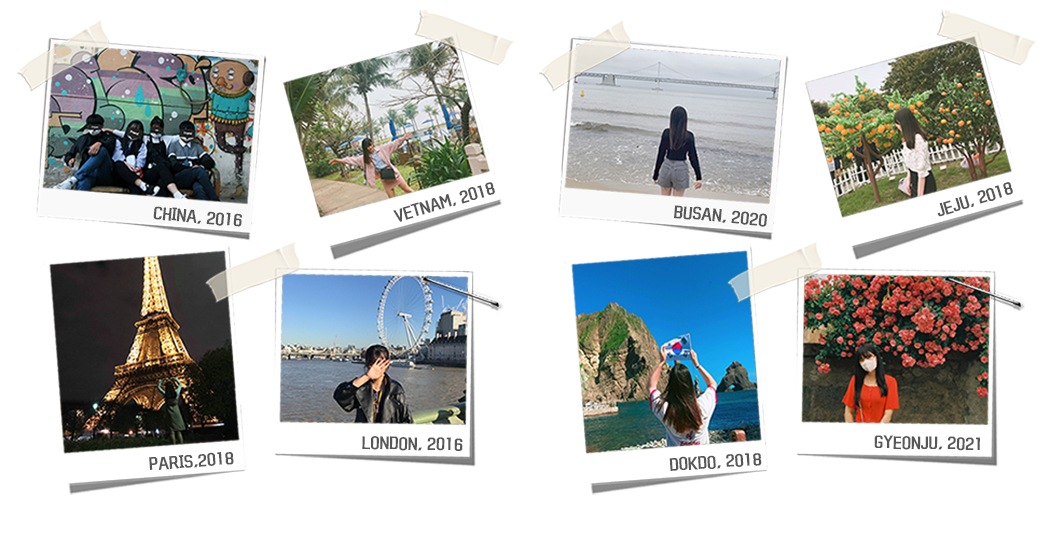
<style>
.page{position:relative;width:1050px;height:544px;background:#ffffff}
.page>*{position:absolute;margin:0}
.t1{font:13.8px "KoreanYNMYT-B";color:#575757}
</style>
<div class="page">
<p class="t1" style="left:393px;top:182px;width:102px;height:40px;rotate:-16deg">VETNAM, 2018</p>
<p class="t1" style="left:937px;top:182px;width:76px;height:35px;rotate:-17deg">JEJU, 2018</p>
<p class="t1" style="left:153px;top:206px;width:89px;height:21px;rotate:5deg">CHINA, 2016</p>
<p class="t1" style="left:674px;top:205px;width:93px;height:22px;rotate:5deg">BUSAN, 2020</p>
<p class="t1" style="left:362px;top:436px;width:101px;height:15px;rotate:1deg">LONDON, 2016</p>
<p class="t1" style="left:874px;top:435px;width:106px;height:16px;rotate:1deg">GYEONJU, 2021</p>
<p class="t1" style="left:149px;top:452px;width:85px;height:18px;rotate:-4deg">PARIS,2018</p>
<p class="t1" style="left:669px;top:453px;width:93px;height:18px;rotate:-4deg">DOKDO, 2018</p>
</div>
